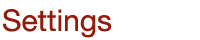
<style>
.page{position:relative;width:200px;height:40px;background:#ffffff}
.page>*{position:absolute;margin:0}
.t1{font:30px "HelveticaNeue";color:#931b0c}
</style>
<div class="page">
<p class="t1" style="left:3px;top:9px;width:109px;height:29px">Settings</p>
</div>
